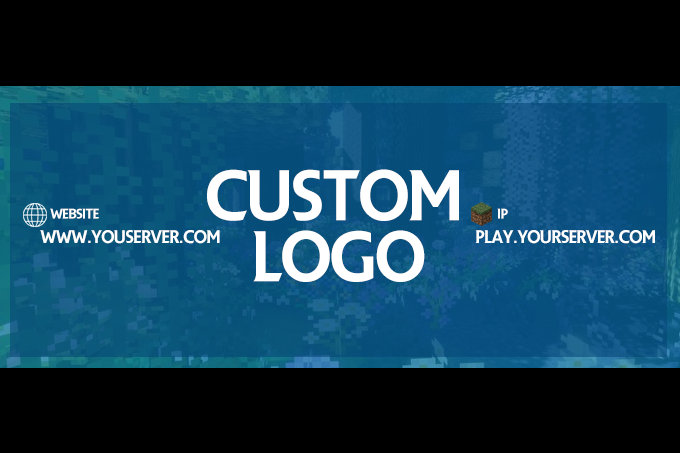
<style>
.page{position:relative;width:680px;height:453px;background:#000000}
.page>*{position:absolute;margin:0}
.t1{font:68.5px "PremierLeague";letter-spacing:-0.03em;color:#ffffff}
.t2{font:13.3px "PremierLeague";letter-spacing:-0.03em;color:#ffffff;scale:1.03 1}
.t3{font:17.4px "PremierLeague";letter-spacing:-0.03em;color:#ffffff}
</style>
<div class="page">
<p class="t1" style="left:207px;top:169px;width:252px;height:52px">CUSTOM</p>
<p class="t2" style="left:50px;top:208px;width:49px;height:11px">WEBSITE</p>
<p class="t2" style="left:497px;top:208px;width:11px;height:11px">IP</p>
<p class="t3" style="left:40px;top:230px;width:180px;height:14px">WWW.YOUSERVER.COM</p>
<p class="t1" style="left:253px;top:230px;width:172px;height:52px">LOGO</p>
<p class="t3" style="left:475px;top:230px;width:180px;height:14px">PLAY.YOURSERVER.COM</p>
</div>
